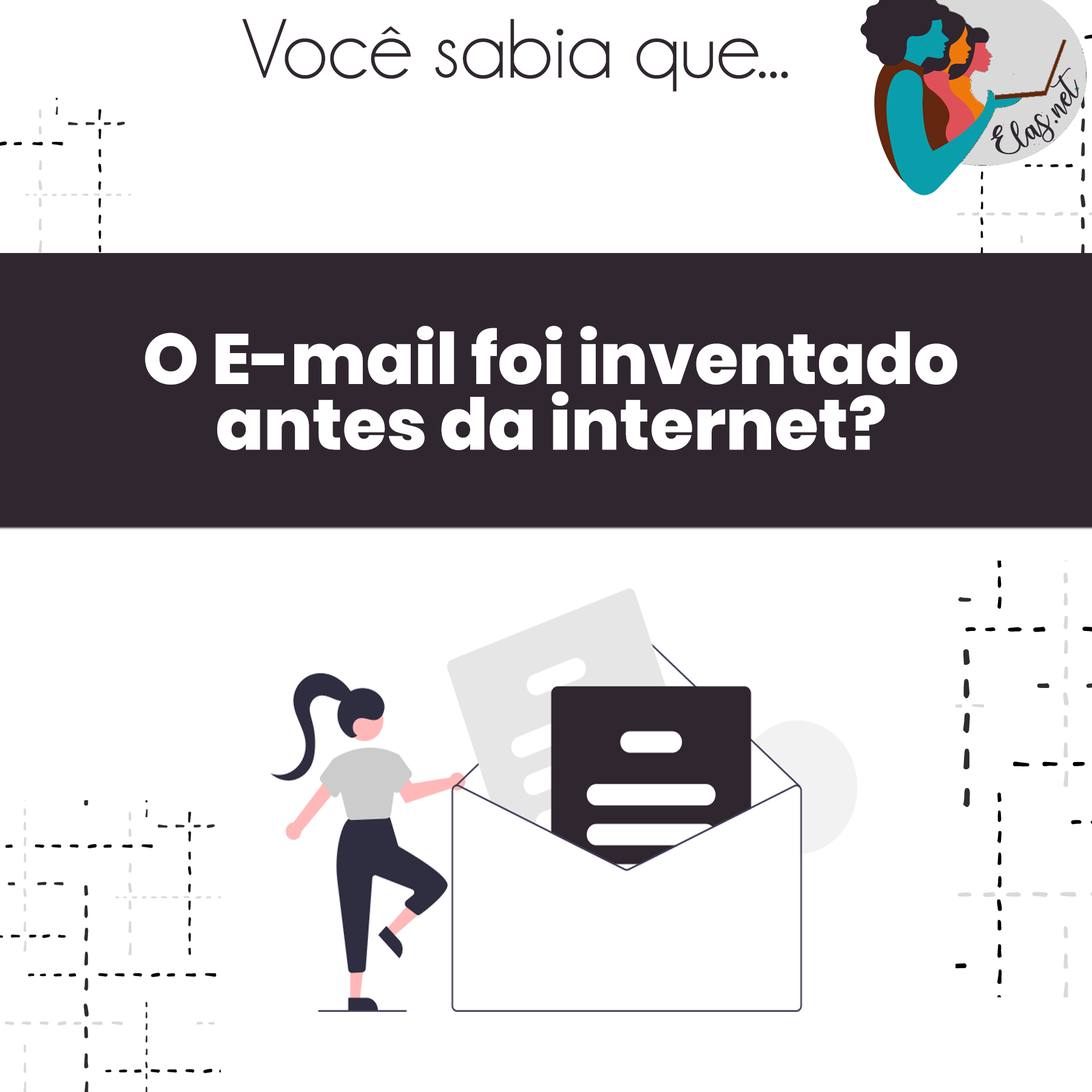
<style>
.page{position:relative;width:1092px;height:1092px;background:#ffffff}
.page>*{position:absolute;margin:0}
.t1{font:84.9px "Champagne&Limousines";color:#2f262f}
.t2{font:25px "charlinda-Regular";color:#2f262f;scale:1.18 1}
.t3{font:71px/65.5px "Poppins-ExtraBold";color:#ffffff}
</style>
<div class="page">
<p class="t1" style="left:242px;top:19px;width:546px;height:73px">Você sabia que...</p>
<p class="t2" style="left:991px;top:67px;width:88px;height:88px;rotate:-42deg">Elas.net</p>
<p class="t3" style="left:145px;top:326px;width:812px;height:124px;text-align:center">O E-mail foi inventado<br>antes da internet?</p>
</div>
